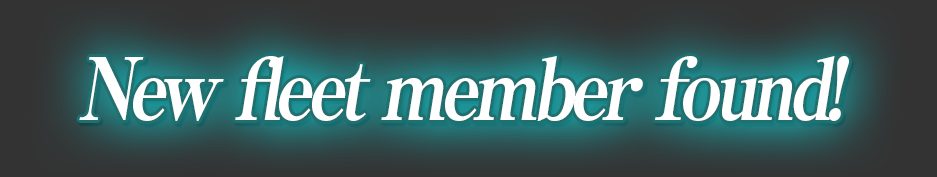
<style>
.page{position:relative;width:937px;height:177px}
.page>*{position:absolute;margin:0}
.t1{font:86px "RyuminPro-ExBold";letter-spacing:-0.08em;color:#ffffff;font-style:italic;scale:0.9 1}
</style>
<div class="page">
<p class="t1" style="left:79px;top:56px;width:770px;height:65px">New fleet member found!</p>
</div>
